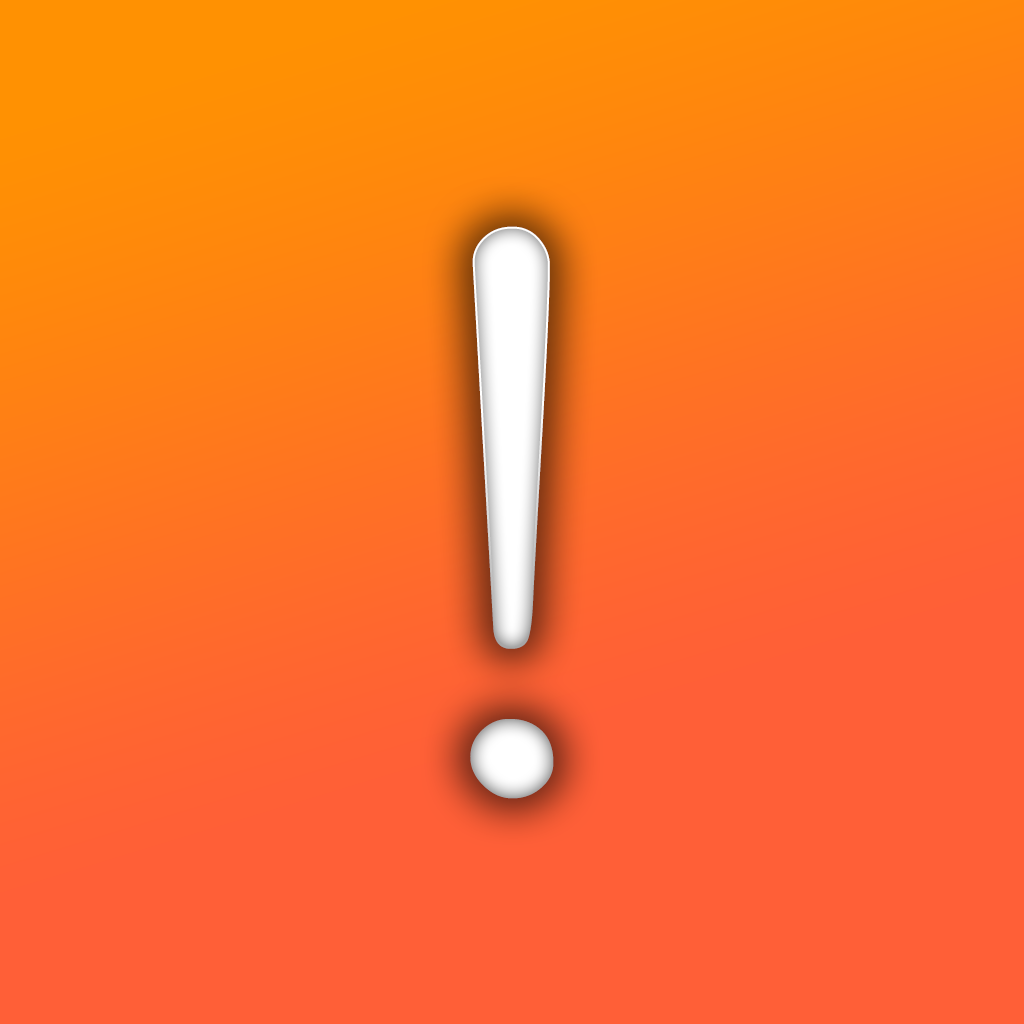
<style>
.page{position:relative;width:1024px;height:1024px;background:#ff5f37}
.page>*{position:absolute;margin:0}
.t1{font:795px "PoorRichard-Regular";letter-spacing:-0.04em;color:#ffffff}
</style>
<div class="page">
<p class="t1" style="left:470px;top:226px;width:84px;height:573px">!</p>
</div>
